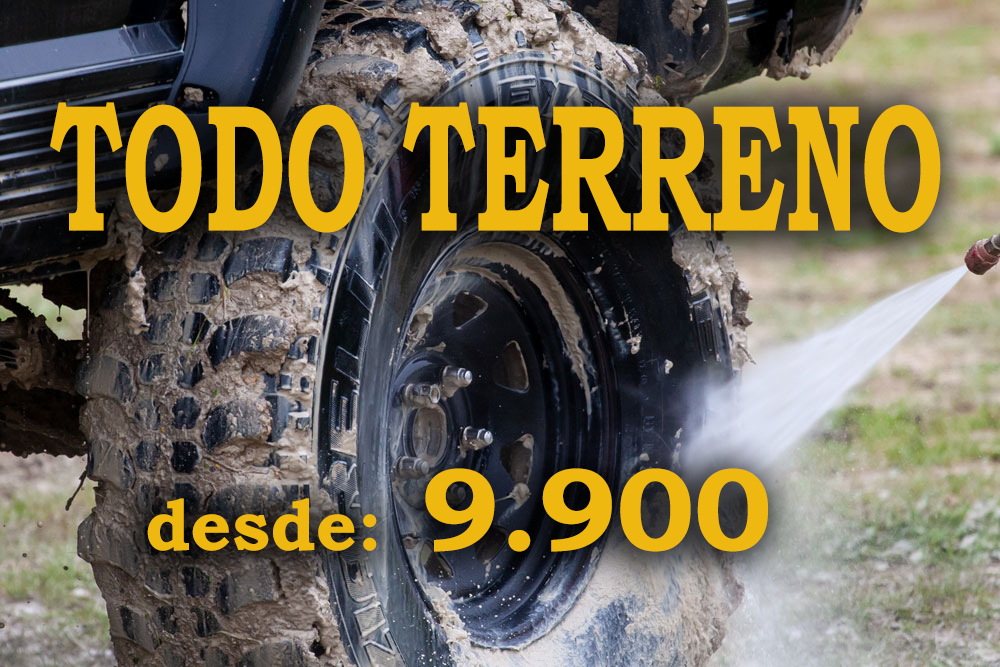
<style>
.page{position:relative;width:1000px;height:667px}
.page>*{position:absolute;margin:0}
.t1{font:181.3px "BookmanOldStyle-Bold";color:#efb810;scale:0.57 1}
.t2{font:72px "BookmanOldStyle-Bold";color:#efb810}
.t3{font:117.4px "BookmanOldStyle-Bold";color:#efb810}
</style>
<div class="page">
<p class="t1" style="left:50px;top:102px;width:891px;height:131px">TODO TERRENO</p>
<p class="t2" style="left:147px;top:468px;width:621px;height:84px"><span class="t3">       </span>desde:<span class="t3"> 9.900</span></p>
</div>
